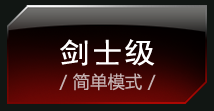
<style>
.page{position:relative;width:214px;height:111px}
.page>*{position:absolute;margin:0}
.t1{font:28.9px "SimHei";letter-spacing:0.03em;color:#ffffff;text-transform:uppercase;scale:1.1 1}
.t2{font:17px "MicrosoftYaHei";letter-spacing:0.025em;color:#c4b2b2}
</style>
<div class="page">
<p class="t1" style="left:60px;top:39px;width:95px;height:27px">剑士级</p>
<p class="t2" style="left:59px;top:73px;width:97px;height:18px">/ 简单模式 /</p>
</div>
